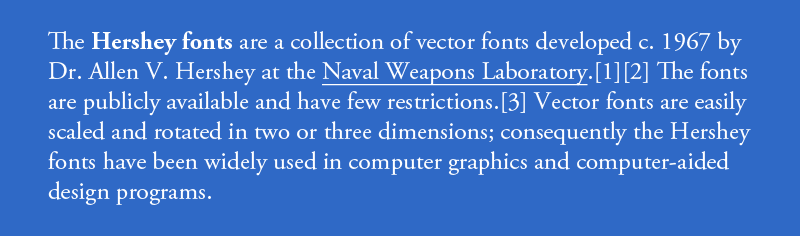
<style>
.page{position:relative;width:800px;height:236px;background:#2f69c6}
.page>*{position:absolute;margin:0}
.t1{font:25px "AGaramondPro-Regular";color:#ffffff}
.t2{font:25px "AGaramondPro-Bold";color:#ffffff}
.t3{font:25px "AGaramondPro-Regular";color:#ffffff;text-decoration:underline}
</style>
<div class="page">
<p class="t1" style="left:47px;top:31px;width:704px;height:174px">The <span class="t2">Hershey fonts</span> are a collection of vector fonts developed c. 1967 by Dr. Allen V. Hershey at the <span class="t3">Naval Weapons Laboratory</span>.[1][2] The fonts are publicly available and have few restrictions.[3] Vector fonts are easily scaled and rotated in two or three dimensions; consequently the Hershey fonts have been widely used in computer graphics and computer-aided design programs.</p>
</div>
